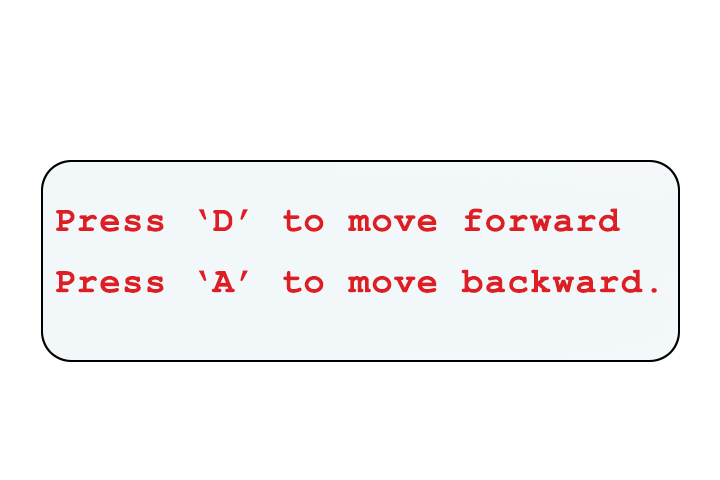
<style>
.page{position:relative;width:720px;height:480px;background:#ffffff}
.page>*{position:absolute;margin:0}
.t1{font:35.4px/61.2px "CourierNewPS-BoldMT";letter-spacing:0.04em;color:#dd1f25}
</style>
<div class="page">
<p class="t1" style="left:56px;top:208px;width:601px;height:85px">Press ‘D’ to move forward <br>Press ‘A’ to move backward.</p>
</div>
